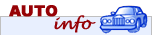
<style>
.page{position:relative;width:152px;height:35px;background:#e8effe}
.page>*{position:absolute;margin:0}
.t1{font:15px "Arial-Black";letter-spacing:0.02em;color:#960206;font-weight:bold}
.t2{font:16px "LucidaHandwriting-Italic";letter-spacing:0.02em;color:#960206;font-weight:bold}
</style>
<div class="page">
<p class="t1" style="left:9px;top:5px;width:49px;height:12px">AUTO</p>
<p class="t2" style="left:54px;top:15px;width:42px;height:18px">info</p>
</div>
